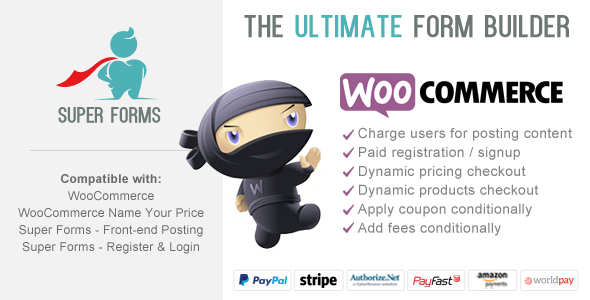
<style>
.page{position:relative;width:590px;height:300px;background:#ffffff}
.page>*{position:absolute;margin:0}
.t1{font:31.7px "Kenzo";letter-spacing:0.025em;color:#6c7776}
.t2{font:31.7px "Kenzo";letter-spacing:0.025em;color:#4eb1b6}
.t3{font:14px/19px "ArialMT";letter-spacing:0.025em;color:#838383}
.t4{font:12px/17px "ArialMT";letter-spacing:0.025em;color:#6a6a6a}
.t5{font:12px/17px "Arial-BoldMT";letter-spacing:0.025em;color:#6a6a6a}
</style>
<div class="page">
<p class="t1" style="left:244px;top:15px;width:325px;height:23px">The <span class="t2">ultimate</span> form builder</p>
<p class="t3" style="left:357px;top:127px;width:215px;height:109px">Charge users for posting content<br>Paid registration / signup<br>Dynamic pricing checkout<br>Dynamic products checkout<br>Apply coupon conditionally<br>Add fees conditionally</p>
<p class="t4" style="left:18px;top:174px;width:186px;height:80px;text-align:center"><span class="t5">Compatible with:<br></span>WooCommerce<br>WooCommerce Name Your Price<br>Super Forms - Front-end Posting<br>Super Forms - Register &amp; Login</p>
</div>
